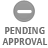
<style>
.page{position:relative;width:48px;height:48px;background:#ffffff}
.page>*{position:absolute;margin:0}
.t1{font:9px "DroidSans-Bold";color:#6d6d6d}
</style>
<div class="page">
<p class="t1" style="left:2px;top:27px;width:46px;height:18px;text-align:center">PENDING<br>APPROVAL</p>
</div>
